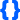
<style>
.page{position:relative;width:20px;height:20px;background:#ffffff}
.page>*{position:absolute;margin:0}
.t1{font:22px "Arial-Black";letter-spacing:0.14em;color:#0060ff}
</style>
<div class="page">
<p class="t1" style="left:0px;top:0px;width:21px;height:20px">{}</p>
</div>
